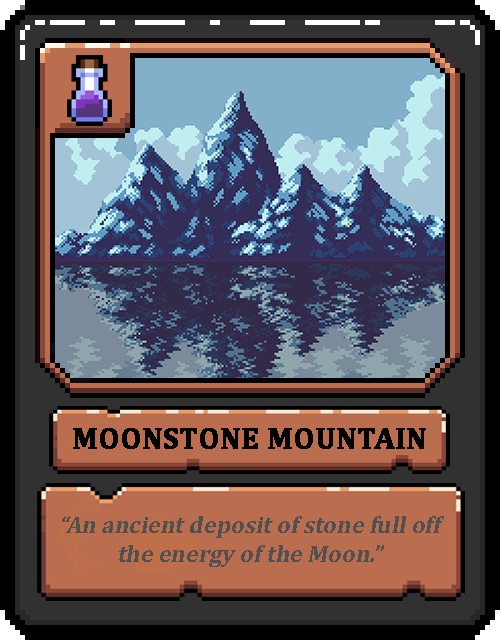
<style>
.page{position:relative;width:500px;height:640px}
.page>*{position:absolute;margin:0}
.t1{font:30px "Cambria-Bold";color:#000000;text-transform:uppercase;font-weight:bold}
.t2{font:24px "Cambria-Bold";color:#505050;font-style:italic}
</style>
<div class="page">
<p class="t1" style="left:73px;top:428px;width:353px;height:21px">Moonstone Mountain</p>
<p class="t2" style="left:62px;top:516px;width:382px;height:51px;text-align:center">“An ancient deposit of stone full off the energy of the Moon.”</p>
</div>
